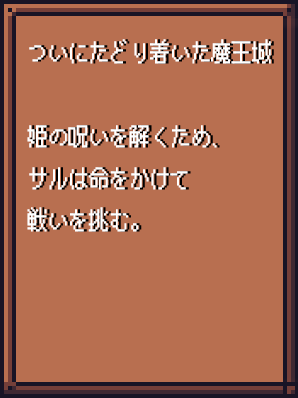
<style>
.page{position:relative;width:298px;height:398px;background:#b86f50}
.page>*{position:absolute;margin:0}
.t1{font:24px "PixelMplus12-Regular";color:#ffffff;scale:0.85 1}
</style>
<div class="page">
<p class="t1" style="left:27px;top:39px;width:244px;height:193px">ついにたどり着いた魔王城<br><br>姫の呪いを解くため、<br>サルは命をかけて<br>戦いを挑む。</p>
</div>
